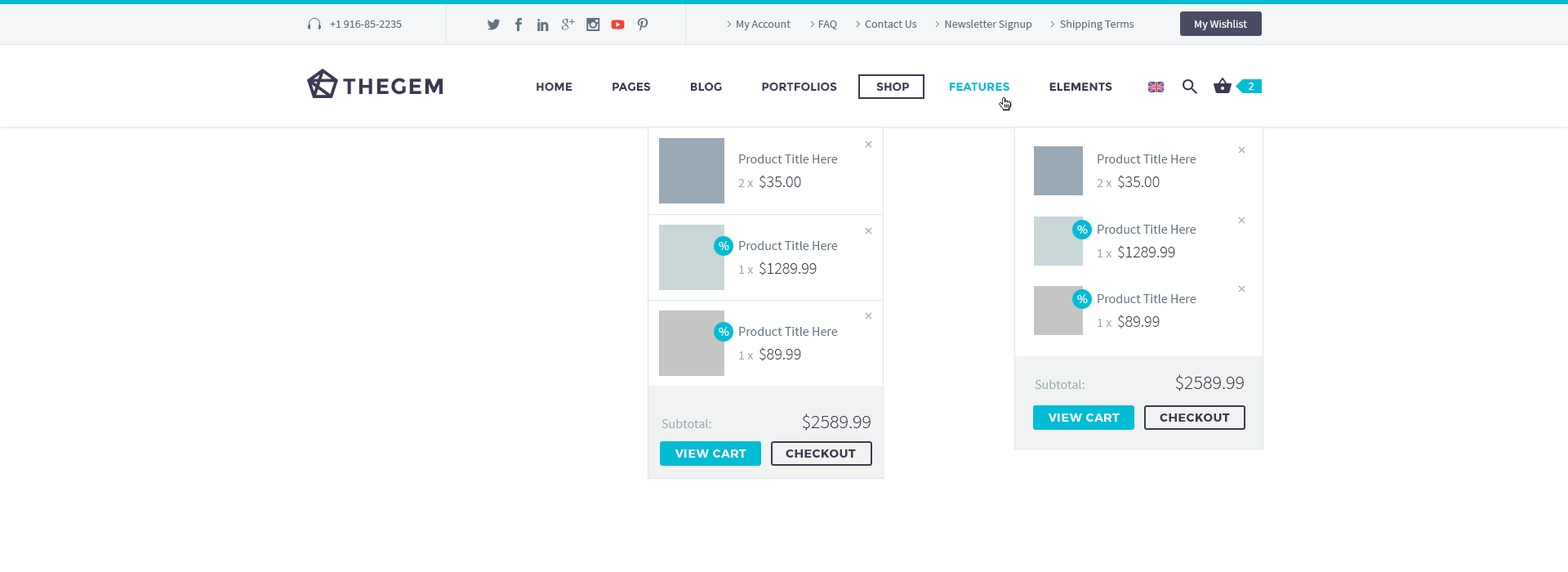
<style>
.page{position:relative;width:1568px;height:572px;background:#ffffff}
.page>*{position:absolute;margin:0}
.t1{font:11.4px "SourceSansPro-Regular";color:#5f727f}
.t2{font:11.4px "SourceSansPro-Regular";color:#ffffff}
.t3{font:22.1px "Montserrat-Bold";letter-spacing:0.05em;color:#3c3950;text-transform:uppercase}
.t4{font:11.4px "Montserrat-Bold";color:#3c3950;text-transform:uppercase}
.t5{font:11.4px "Montserrat-Bold";color:#00bcd4;text-transform:uppercase}
.t6{font:13.1px "SourceSansPro-Regular";color:#5f727f}
.t7{font:13.1px "SourceSansPro-Regular";color:#99a9b5}
.t8{font:16.3px "SourceSansPro-Light";color:#3c3950}
.t9{font:13.1px "SourceSansPro-Regular";color:#ffffff}
.t10{font:19.6px "SourceSansPro-Light";color:#3c3950}
.t11{font:11.4px "Montserrat-Bold";letter-spacing:0.05em;color:#ffffff;text-transform:uppercase}
.t12{font:11.4px "Montserrat-Bold";letter-spacing:0.05em;color:#46485c;text-transform:uppercase}
</style>
<div class="page">
<p class="t1" style="left:330px;top:20px;width:72px;height:8px">+1 916-85-2235</p>
<p class="t1" style="left:737px;top:20px;width:397px;height:10px">My Account            FAQ            Contact Us            Newsletter Signup            Shipping Terms</p>
<p class="t2" style="left:1195px;top:20px;width:52px;height:10px">My Wishlist</p>
<p class="t3" style="left:391px;top:78px;width:52px;height:17px">gem</p>
<p class="t3" style="left:343px;top:78px;width:46px;height:16px">the</p>
<p class="t4" style="left:537px;top:82px;width:575px;height:9px">Home             Pages             Blog             Portfolios             Shop             <span class="t5">Features</span>             Elements</p>
<p class="t2" style="left:1248px;top:82px;width:6px;height:8px">2</p>
<p class="t6" style="left:739px;top:154px;width:99px;height:9px">Product Title Here</p>
<p class="t6" style="left:1098px;top:154px;width:98px;height:9px">Product Title Here</p>
<p class="t7" style="left:738px;top:179px;width:16px;height:8px">2 x</p>
<p class="t8" style="left:760px;top:175px;width:41px;height:14px">$35.00</p>
<p class="t7" style="left:1097px;top:179px;width:15px;height:8px">2 x</p>
<p class="t8" style="left:1118px;top:175px;width:42px;height:14px">$35.00</p>
<p class="t9" style="left:1077px;top:225px;width:11px;height:9px">%</p>
<p class="t6" style="left:1098px;top:225px;width:98px;height:9px">Product Title Here</p>
<p class="t9" style="left:719px;top:241px;width:10px;height:9px">%</p>
<p class="t6" style="left:739px;top:241px;width:99px;height:9px">Product Title Here</p>
<p class="t8" style="left:1118px;top:245px;width:57px;height:14px">$1289.99</p>
<p class="t7" style="left:1098px;top:249px;width:14px;height:8px">1 x</p>
<p class="t7" style="left:739px;top:265px;width:15px;height:9px">1 x</p>
<p class="t8" style="left:760px;top:261px;width:57px;height:14px">$1289.99</p>
<p class="t9" style="left:1077px;top:294px;width:11px;height:9px">%</p>
<p class="t6" style="left:1098px;top:294px;width:98px;height:9px">Product Title Here</p>
<p class="t8" style="left:1118px;top:314px;width:42px;height:14px">$89.99</p>
<p class="t9" style="left:719px;top:327px;width:10px;height:9px">%</p>
<p class="t6" style="left:739px;top:327px;width:99px;height:9px">Product Title Here</p>
<p class="t7" style="left:1098px;top:318px;width:14px;height:9px">1 x</p>
<p class="t7" style="left:739px;top:351px;width:15px;height:8px">1 x</p>
<p class="t8" style="left:760px;top:347px;width:41px;height:14px">$89.99</p>
<p class="t10" style="left:1175px;top:374px;width:69px;height:17px">$2589.99</p>
<p class="t7" style="left:1035px;top:380px;width:50px;height:9px">Subtotal:</p>
<p class="t10" style="left:802px;top:413px;width:69px;height:17px">$2589.99</p>
<p class="t11" style="left:1048px;top:413px;width:72px;height:8px">view cart</p>
<p class="t12" style="left:1160px;top:413px;width:70px;height:8px">checkout</p>
<p class="t7" style="left:662px;top:419px;width:49px;height:9px">Subtotal:</p>
<p class="t11" style="left:675px;top:449px;width:71px;height:8px">view cart</p>
<p class="t12" style="left:786px;top:449px;width:70px;height:8px">checkout</p>
</div>
